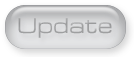
<style>
.page{position:relative;width:134px;height:57px}
.page>*{position:absolute;margin:0}
.t1{font:25px "MetrostyleExtended-Regular";color:#9e9fa0}
</style>
<div class="page">
<p class="t1" style="left:18px;top:18px;width:94px;height:20px">Update</p>
</div>
